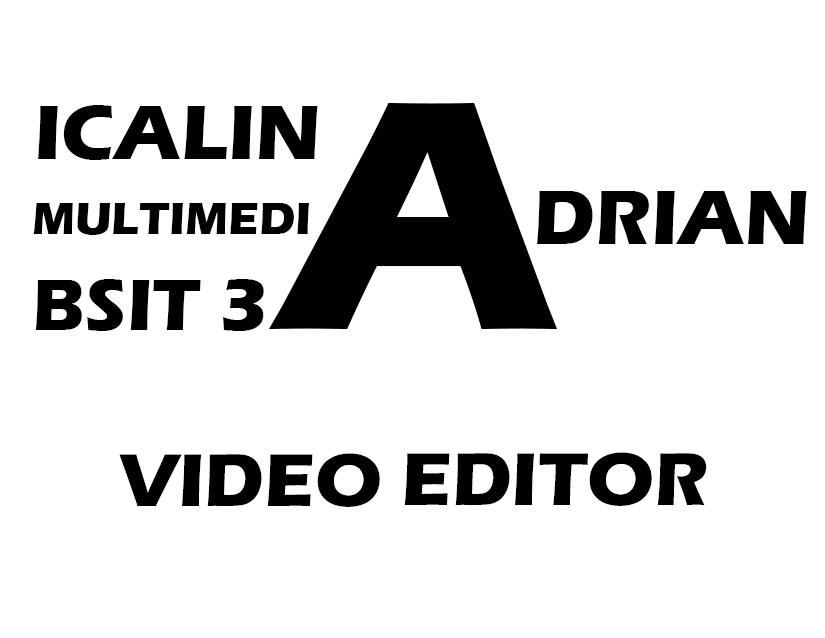
<style>
.page{position:relative;width:825px;height:638px;background:#ffffff}
.page>*{position:absolute;margin:0}
.t1{font:80.4px "ErasITC-Bold";color:#000000}
.t2{font:338.7px "ErasITC-Bold";color:#000000}
.t3{font:46.8px "ErasITC-Bold";color:#000000}
.t4{font:75.1px "ErasITC-Bold";color:#000000}
.t5{font:77.1px "ErasITC-Bold";color:#000000}
</style>
<div class="page">
<p class="t1" style="left:38px;top:105px;width:280px;height:55px">ICALIN</p>
<p class="t2" style="left:268px;top:103px;width:290px;height:226px">A</p>
<p class="t1" style="left:537px;top:191px;width:270px;height:53px">DRIAN</p>
<p class="t3" style="left:33px;top:203px;width:276px;height:32px">MULTIMEDI</p>
<p class="t4" style="left:35px;top:279px;width:229px;height:52px">BSIT 3</p>
<p class="t5" style="left:119px;top:452px;width:588px;height:55px">VIDEO EDITOR</p>
</div>
